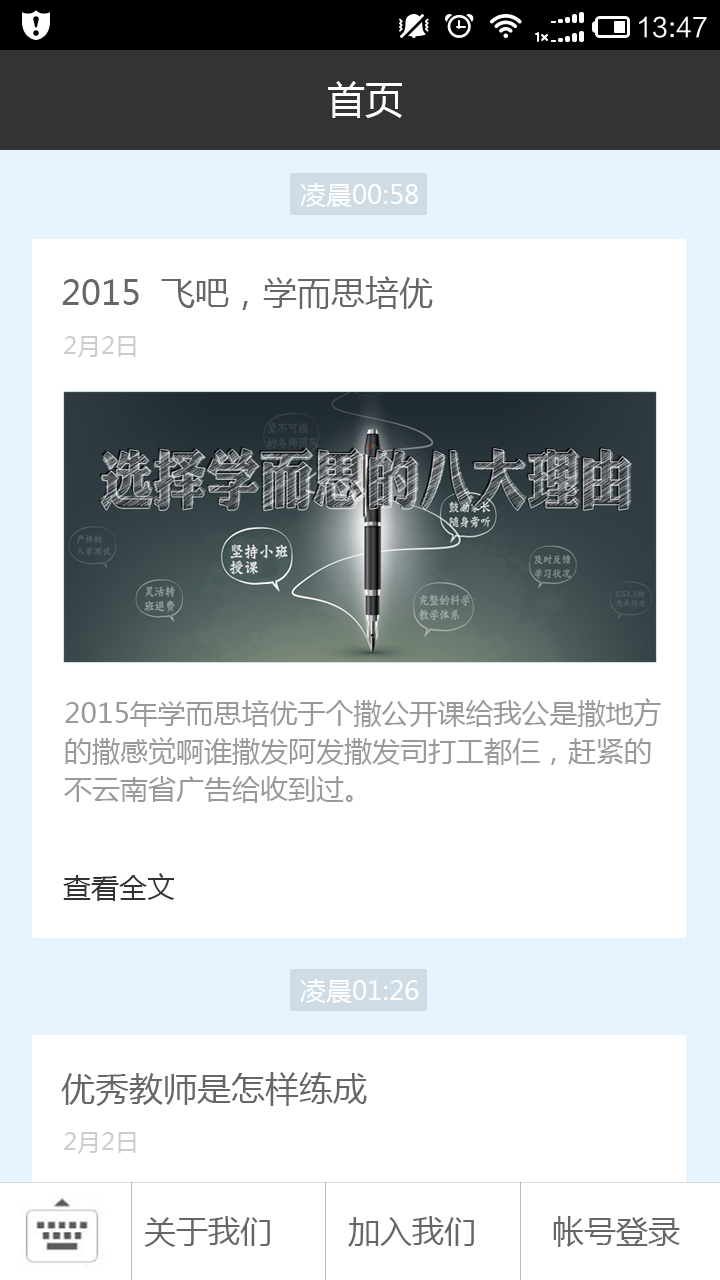
<style>
.page{position:relative;width:720px;height:1280px;background:#ffffff}
.page>*{position:absolute;margin:0}
.t1{font:38px "MicrosoftYaHei";color:#ffffff}
.t2{font:26px "MicrosoftYaHei";color:#ffffff}
.t3{font:34px "MicrosoftYaHei";color:#666666}
.t4{font:24px "MicrosoftYaHei";color:#cccccc}
.t5{font:28px/38px "MicrosoftYaHei";color:#999999}
.t6{font:28px "MicrosoftYaHei";color:#333333}
.t7{font:32px "MicrosoftYaHei";color:#666666}
</style>
<div class="page">
<p class="t1" style="left:328px;top:81px;width:74px;height:37px">首页</p>
<p class="t2" style="left:300px;top:183px;width:118px;height:24px">凌晨00:58</p>
<p class="t3" style="left:62px;top:276px;width:371px;height:34px">2015  飞吧，学而思培优</p>
<p class="t4" style="left:64px;top:336px;width:72px;height:22px">2月2日</p>
<p class="t5" style="left:64px;top:698px;width:597px;height:105px">2015年学而思培优于个撒公开课给我公是撒地方<br>的撒感觉啊谁撒发阿发撒发司打工都仨，赶紧的<br>不云南省广告给收到过。</p>
<p class="t6" style="left:63px;top:873px;width:112px;height:28px">查看全文</p>
<p class="t2" style="left:300px;top:979px;width:119px;height:24px">凌晨01:26</p>
<p class="t3" style="left:61px;top:1072px;width:306px;height:34px">优秀教师是怎样练成</p>
<p class="t4" style="left:64px;top:1132px;width:72px;height:22px">2月2日</p>
<p class="t7" style="left:144px;top:1216px;width:536px;height:31px">关于我们        加入我们        帐号登录</p>
</div>
